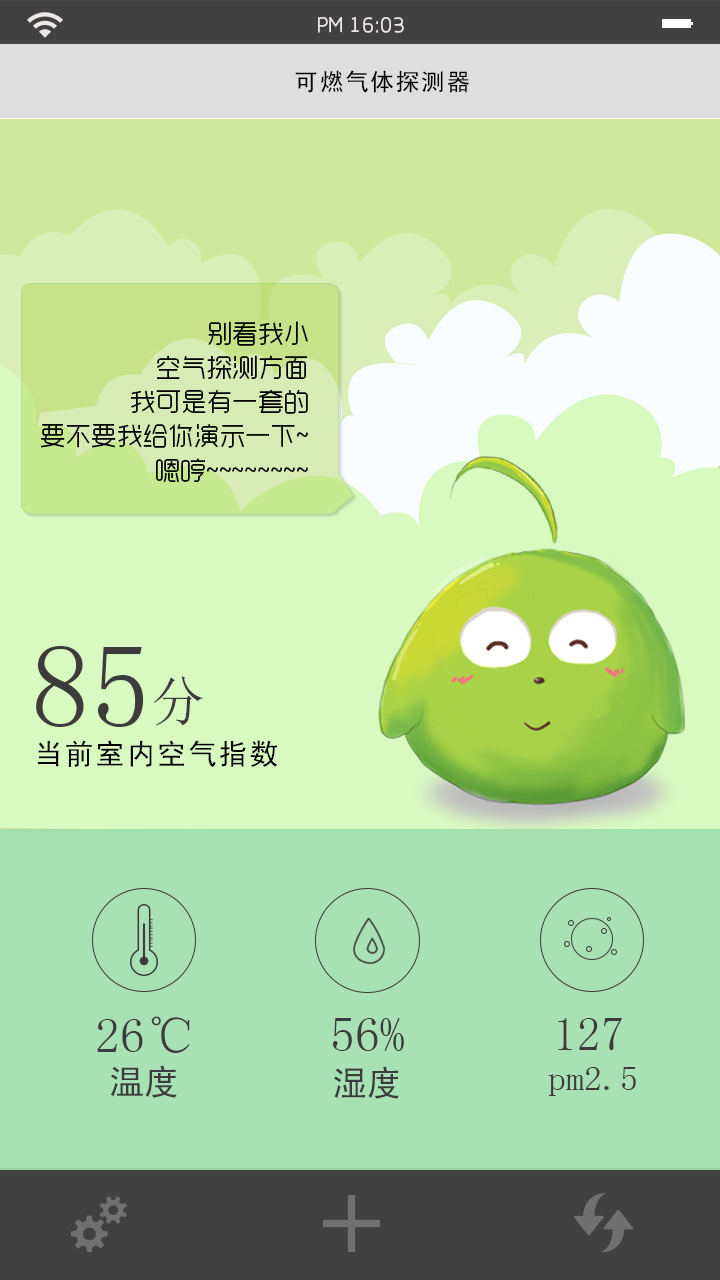
<style>
.page{position:relative;width:720px;height:1280px;background:#a8e1b3}
.page>*{position:absolute;margin:0}
.t1{font:21.3px "RTWSYueGoTrial-Regular";color:#ebe7e6}
.t2{font:24px "SimHei";letter-spacing:0.06em;color:#000000}
.t3{font:25.7px/34.3px "RTWSYueGoTrial-Regular";color:#000000}
.t4{font:119.2px "SimSun";color:#3c3c3c}
.t5{font:54.5px "SimSun";color:#3c3c3c}
.t6{font:29.1px "SimHei";letter-spacing:0.06em;color:#000000}
.t7{font:50px "SimSun";color:#3c3c3c}
.t8{font:47.7px "SimSun";color:#3c3c3c}
.t9{font:35px "SimHei";color:#3c3c3c}
.t10{font:35px "SimSun";color:#3c3c3c}
</style>
<div class="page">
<p class="t1" style="left:318px;top:17px;width:86px;height:16px">PM 16:03</p>
<p class="t2" style="left:295px;top:70px;width:174px;height:23px">可燃气体探测器</p>
<p class="t3" style="left:41px;top:321px;width:267px;height:162px;text-align:right">别看我小<br>空气探测方面<br>我可是有一套的<br>要不要我给你演示一下~<br>嗯哼~~~~~~~~</p>
<p class="t4" style="left:36px;top:646px;width:108px;height:81px">85</p>
<p class="t5" style="left:153px;top:676px;width:50px;height:50px">分</p>
<p class="t6" style="left:38px;top:740px;width:240px;height:27px">当前室内空气指数</p>
<p class="t7" style="left:97px;top:1016px;width:93px;height:37px">26℃</p>
<p class="t7" style="left:332px;top:1018px;width:72px;height:33px">56%</p>
<p class="t8" style="left:558px;top:1018px;width:64px;height:32px">127</p>
<p class="t9" style="left:110px;top:1065px;width:67px;height:33px">温度</p>
<p class="t9" style="left:334px;top:1066px;width:65px;height:33px">湿度</p>
<p class="t10" style="left:548px;top:1067px;width:88px;height:29px">pm2.5</p>
</div>
